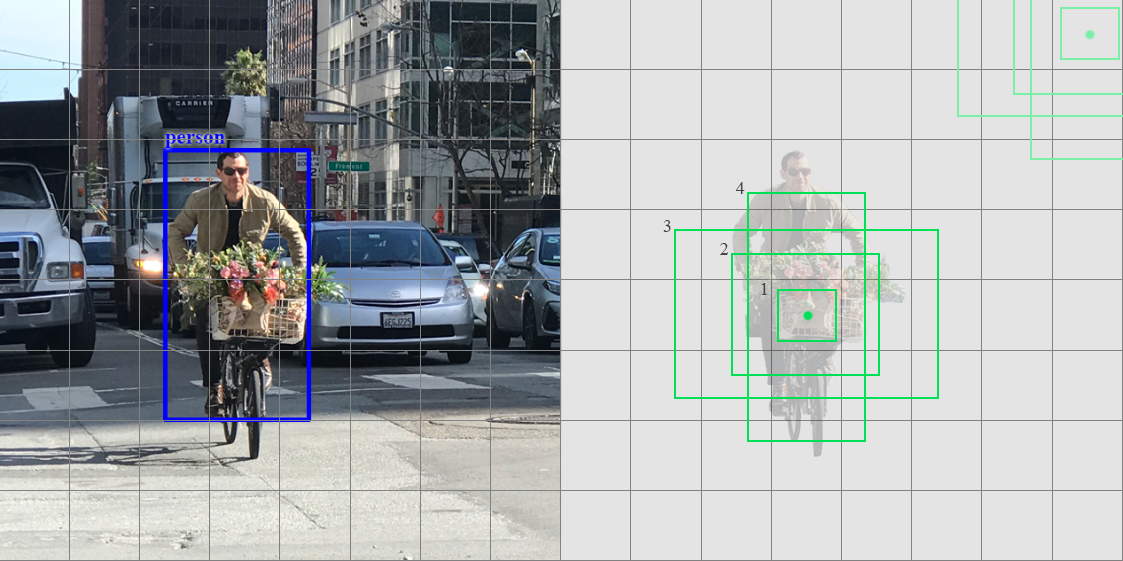
<style>
.page{position:relative;width:1123px;height:561px;background:#e4e4e4}
.page>*{position:absolute;margin:0}
.t1{font:18px "TimesNewRomanPSMT";letter-spacing:-0.01em;color:#444444}
</style>
<div class="page">
<p class="t1" style="left:735px;top:182px;width:10px;height:12px">4</p>
<p class="t1" style="left:663px;top:220px;width:8px;height:12px">3</p>
<p class="t1" style="left:720px;top:243px;width:8px;height:12px">2</p>
<p class="t1" style="left:761px;top:283px;width:6px;height:12px">1</p>
</div>
